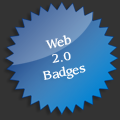
<style>
.page{position:relative;width:120px;height:120px;background:#333333}
.page>*{position:absolute;margin:0}
.t1{font:12.6px "Sling";color:#ffffff}
</style>
<div class="page">
<p class="t1" style="left:42px;top:35px;width:44px;height:45px;text-align:center;rotate:-11deg">Web<br>2.0<br>Badges</p>
</div>
